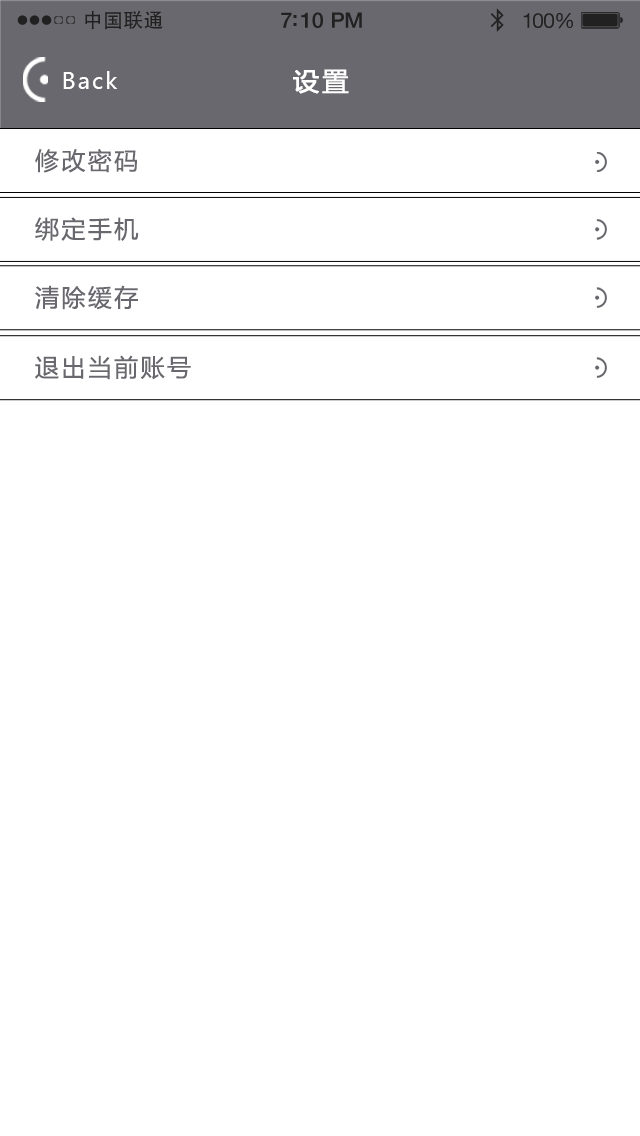
<style>
.page{position:relative;width:640px;height:1136px;background:#ffffff}
.page>*{position:absolute;margin:0}
.t1{font:19.7px "AdobeHeitiStd-Regular";letter-spacing:0.02em;color:#212121}
.t2{font:21.4px "HelveticaNeue-Medium";letter-spacing:-0.02em;color:#212121}
.t3{font:20.6px "HelveticaNeue";letter-spacing:-0.02em;color:#212121}
.t4{font:22px "MicrosoftYaHei";letter-spacing:0.1em;color:#ffffff}
.t5{font:26px "MicrosoftYaHei";letter-spacing:0.1em;color:#ffffff;font-weight:bold}
.t6{font:24px "MicrosoftYaHei";letter-spacing:0.1em;color:#68686e}
</style>
<div class="page">
<p class="t1" style="left:85px;top:10px;width:78px;height:20px">中国联通</p>
<p class="t2" style="left:281px;top:12px;width:81px;height:16px">7:10 PM</p>
<p class="t3" style="left:523px;top:13px;width:50px;height:16px">100%</p>
<p class="t4" style="left:63px;top:71px;width:55px;height:18px">Back</p>
<p class="t5" style="left:293px;top:69px;width:56px;height:25px">设置</p>
<p class="t6" style="left:35px;top:149px;width:102px;height:24px">修改密码</p>
<p class="t6" style="left:35px;top:217px;width:104px;height:24px">绑定手机</p>
<p class="t6" style="left:35px;top:285px;width:103px;height:25px">清除缓存</p>
<p class="t6" style="left:35px;top:355px;width:156px;height:25px">退出当前账号</p>
</div>
